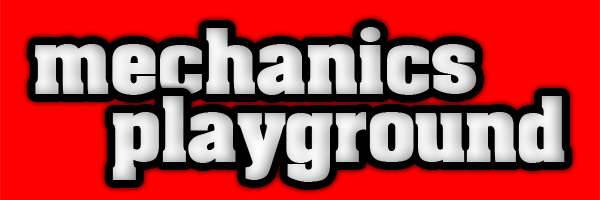
<style>
.page{position:relative;width:600px;height:200px;background:#ff0000}
.page>*{position:absolute;margin:0}
.t1{font:77px "AardvarkBold";color:#e0e0e0}
.t2{font:77px "AardvarkBold";color:#e3e3e3}
</style>
<div class="page">
<p class="t1" style="left:34px;top:27px;width:443px;height:68px">mechanics</p>
<p class="t2" style="left:112px;top:96px;width:453px;height:86px">playground</p>
</div>
